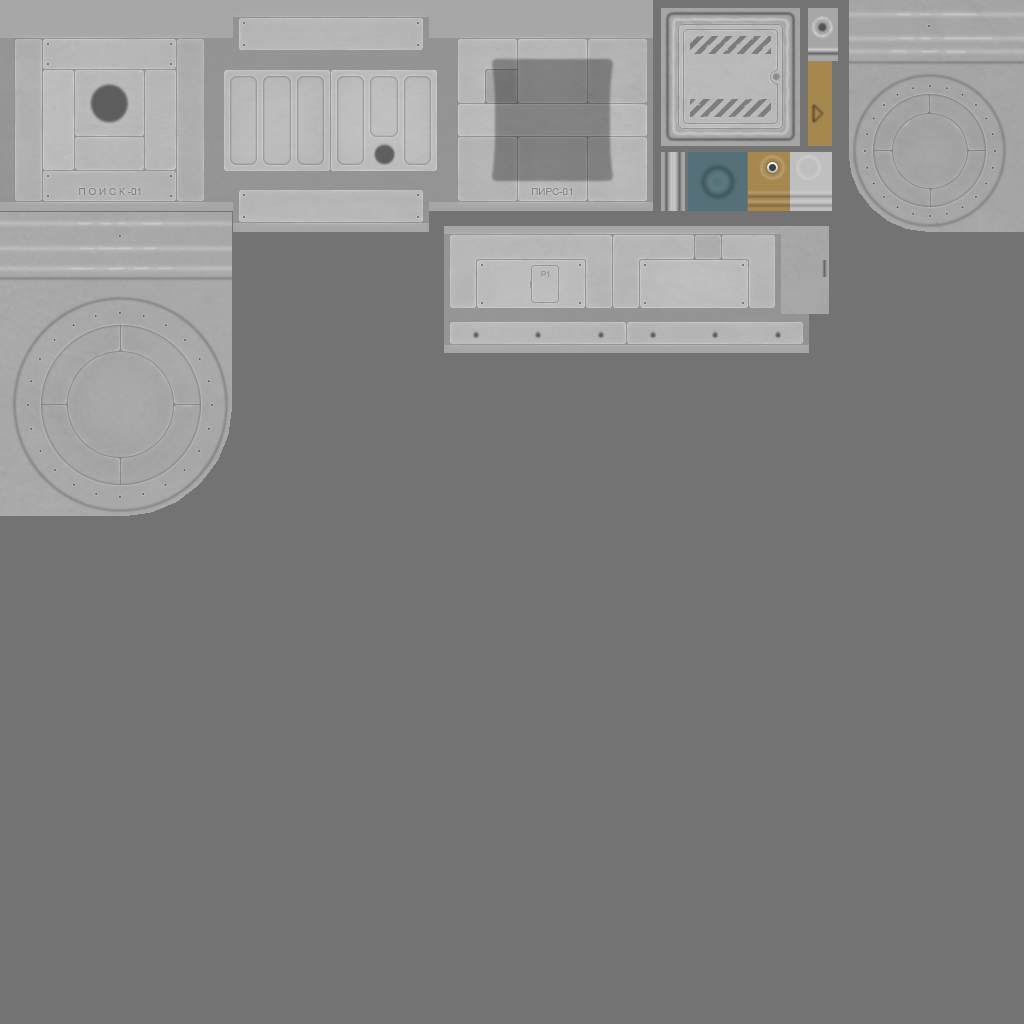
<style>
.page{position:relative;width:1024px;height:1024px;background:#737373}
.page>*{position:absolute;margin:0}
.t1{font:10px "ArialMT";color:#808080}
.t2{font:10px "ArialMT";color:#828383}
.t3{font:8px "ArialMT";color:#969595}
</style>
<div class="page">
<p class="t1" style="left:79px;top:188px;width:62px;height:7px">П О́ И С К -01</p>
<p class="t2" style="left:531px;top:188px;width:42px;height:7px">ПИРС-01</p>
<p class="t3" style="left:541px;top:271px;width:9px;height:6px">P1</p>
</div>
